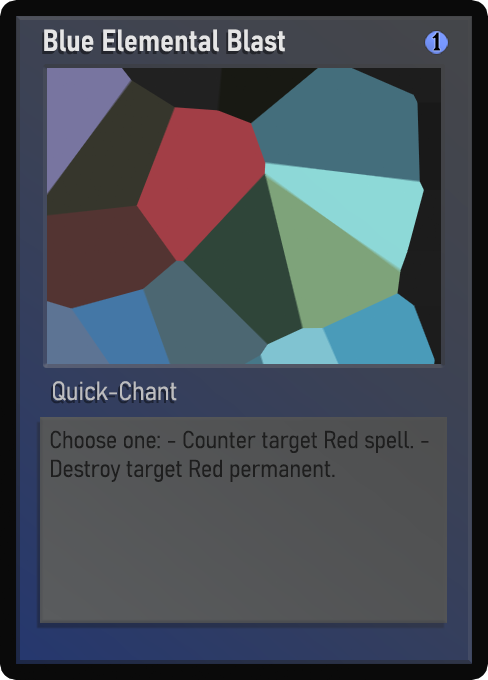
<style>
.page{position:relative;width:488px;height:680px}
.page>*{position:absolute;margin:0}
.t1{font:30px "Bahnschrift-SemiBoldSemiCondensed";color:#f2f2f2;font-weight:bold}
.t2{font:25px "WTRRoycroft";color:#000000;font-weight:bold;scale:1.09 1}
.t3{font:26px "Bahnschrift-LightSemiCondensed";color:#c8c8c8;font-weight:bold}
.t4{font:24px "Bahnschrift-LightSemiCondensed";color:#1e1e1e;font-weight:bold}
</style>
<div class="page">
<p class="t1" style="left:44px;top:29px;width:241px;height:23px;opacity:0.9">Blue Elemental Blast</p>
<p class="t2" style="left:432px;top:32px;width:9px;height:19px">1</p>
<p class="t3" style="left:53px;top:381px;width:124px;height:20px;opacity:0.9">Quick-Chant</p>
<p class="t4" style="left:50px;top:430px;width:379px;height:52px">Choose one: - Counter target Red spell. - Destroy target Red permanent.</p>
</div>
